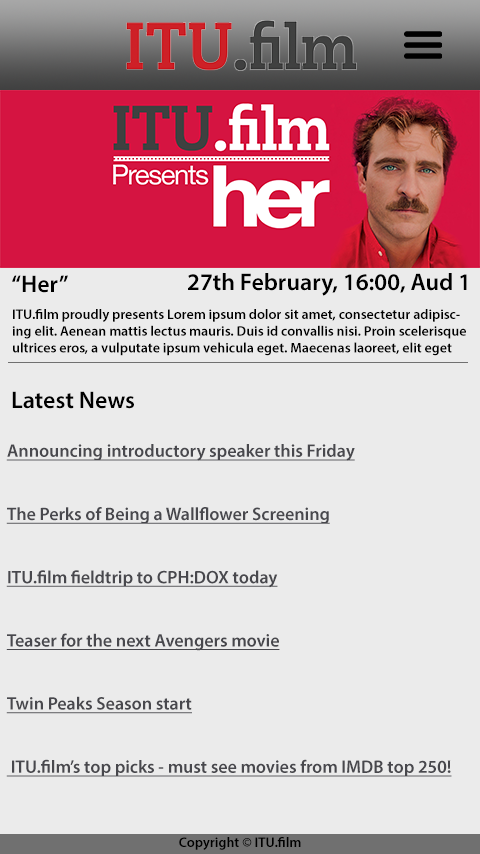
<style>
.page{position:relative;width:480px;height:854px;background:#ebebeb}
.page>*{position:absolute;margin:0}
.t1{font:24px "MyriadPro-Semibold";color:#000000}
.t2{font:14px "MyriadPro-Semibold";color:#000000}
.t3{font:18px "MyriadPro-Semibold";color:#48484d;text-decoration:underline}
</style>
<div class="page">
<p class="t1" style="left:12px;top:275px;width:56px;height:18px">“Her”</p>
<p class="t1" style="left:188px;top:273px;width:279px;height:23px">27th February, 16:00, Aud 1</p>
<p class="t2" style="left:12px;top:309px;width:454px;height:47px">ITU.film proudly presents Lorem ipsum dolor sit amet, consectetur adipiscing elit. Aenean mattis lectus mauris. Duis id convallis nisi. Proin scelerisque ultrices eros, a vulputate ipsum vehicula eget. Maecenas laoreet, elit eget malesuada dignissim, ipsum ante</p>
<p class="t1" style="left:12px;top:391px;width:122px;height:18px">Latest News</p>
<p class="t3" style="left:6px;top:444px;width:446px;height:333px">Announcing introductory speaker this Friday<br><br>The Perks of Being a Wallflower Screening<br><br>ITU.film fieldtrip to CPH:DOX today<br><br>Teaser for the next Avengers movie<br><br>Twin Peaks Season start<br><br> ITU.film’s top picks - must see movies from IMDB top 250!</p>
<p class="t2" style="left:179px;top:837px;width:122px;height:13px">Copyright © ITU.film</p>
</div>
